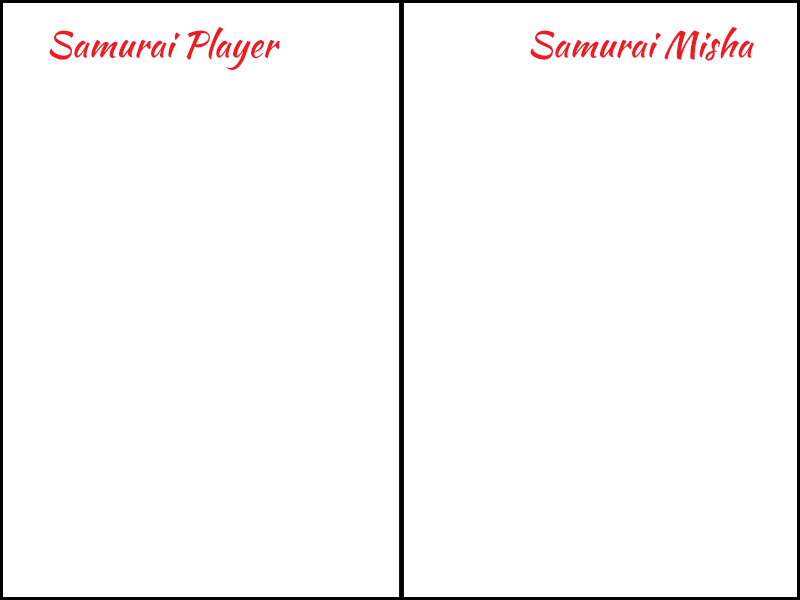
<style>
.page{position:relative;width:800px;height:600px;background:#ffffff}
.page>*{position:absolute;margin:0}
.t1{font:36px "KaushanScript-Regular";color:#ed1c24}
</style>
<div class="page">
<p class="t1" style="left:49px;top:27px;width:231px;height:43px">Samurai Player</p>
<p class="t1" style="left:530px;top:27px;width:224px;height:34px">Samurai Misha</p>
</div>
